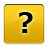
<style>
.page{position:relative;width:48px;height:48px;background:#ffffff}
.page>*{position:absolute;margin:0}
.t1{font:28px "Meiryo-Bold";color:#000000}
</style>
<div class="page">
<p class="t1" style="left:19px;top:12px;width:14px;height:21px">?</p>
</div>
